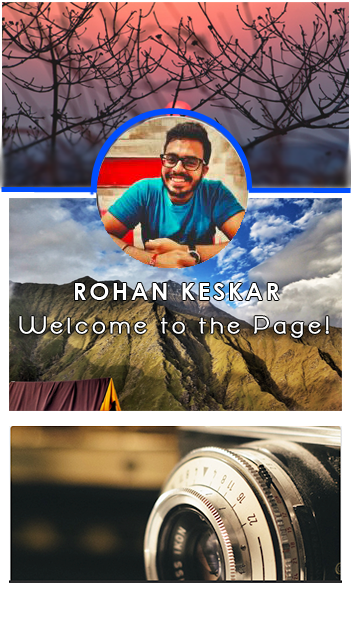
<style>
.page{position:relative;width:351px;height:618px}
.page>*{position:absolute;margin:0}
.t1{font:23.5px "CenturyGothic-Bold";letter-spacing:0.12em;color:#ffffff}
.t2{font:23.5px "AlightyNesiaBold";letter-spacing:0.12em;color:#ffffff;font-weight:bold}
</style>
<div class="page">
<p class="t1" style="left:75px;top:283px;width:204px;height:17px">ROHAN KESKAR</p>
<p class="t2" style="left:19px;top:316px;width:310px;height:22px">Welcome to the Page!</p>
</div>
